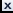
<style>
.page{position:relative;width:13px;height:13px;background:#000000}
.page>*{position:absolute;margin:0}
.t1{font:8.4px "Arial-BoldMT";color:#15213a;scale:1.43 1}
</style>
<div class="page">
<p class="t1" style="left:4px;top:2px;width:8px;height:7px">X</p>
</div>
